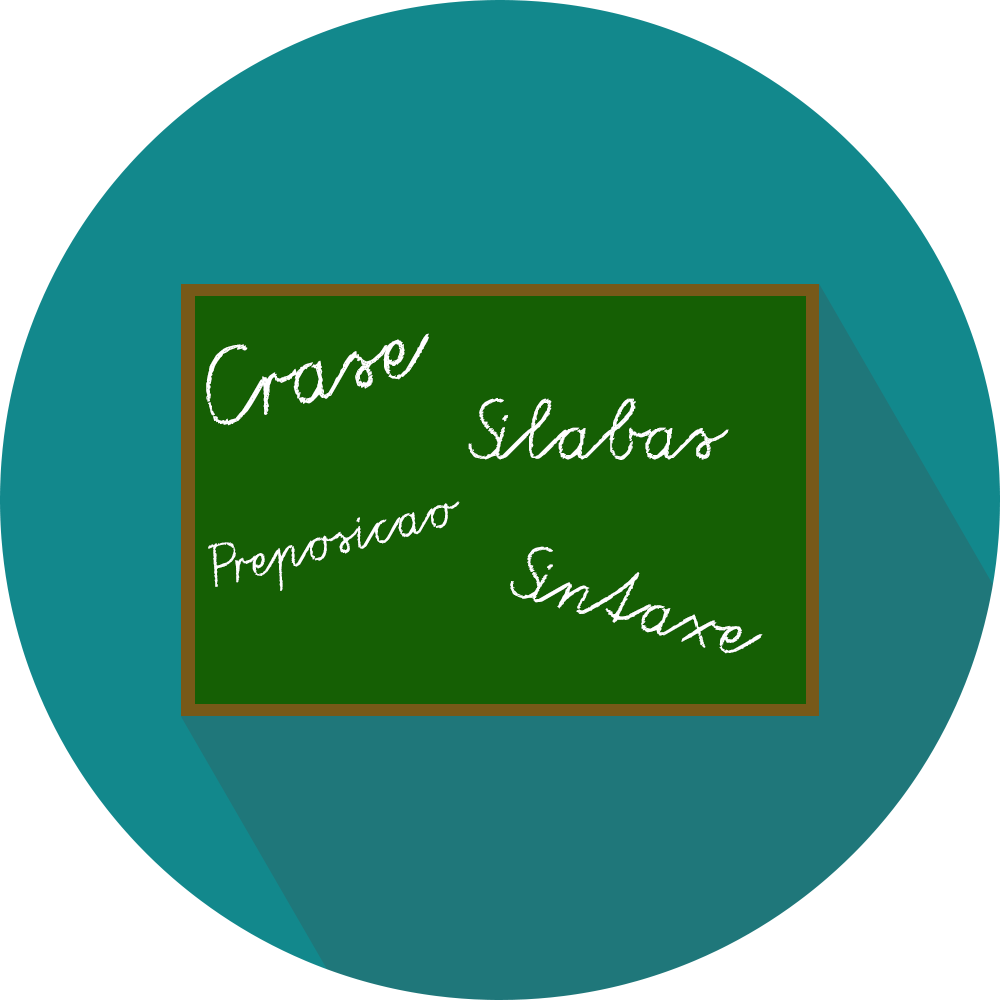
<style>
.page{position:relative;width:1000px;height:1000px;background:#12888c}
.page>*{position:absolute;margin:0}
.t1{font:74.3px "Tafelschrift";color:#ffffff}
.t2{font:61px "Tafelschrift";color:#ffffff}
.t3{font:42.8px "Tafelschrift";color:#ffffff}
.t4{font:56px "Tafelschrift";color:#ffffff}
</style>
<div class="page">
<p class="t1" style="left:206px;top:333px;width:223px;height:93px;rotate:-15deg">Crase</p>
<p class="t2" style="left:468px;top:398px;width:261px;height:62px">Silabas</p>
<p class="t3" style="left:208px;top:501px;width:252px;height:90px;rotate:-15deg">Preposicao</p>
<p class="t4" style="left:510px;top:546px;width:253px;height:108px;rotate:15deg">Sintaxe</p>
</div>
